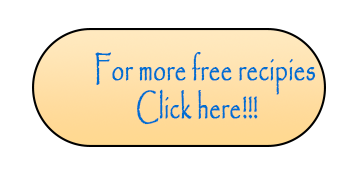
<style>
.page{position:relative;width:364px;height:177px;background:#ffffff}
.page>*{position:absolute;margin:0}
.t1{font:34.2px "Papyrus-Regular";color:#006fd1;font-weight:bold;scale:0.65 1}
</style>
<div class="page">
<p class="t1" style="left:95px;top:52px;width:221px;height:43px">For more free recipies</p>
<p class="t1" style="left:137px;top:89px;width:104px;height:36px">Click here</p>
<p class="t1" style="left:243px;top:96px;width:15px;height:23px">!!!</p>
</div>
